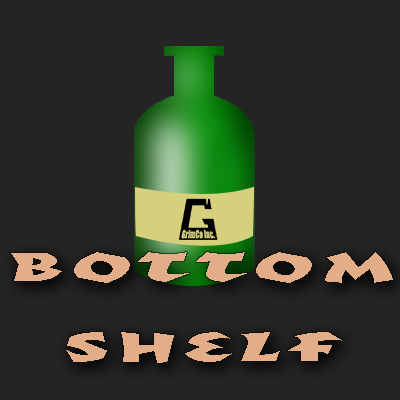
<style>
.page{position:relative;width:400px;height:400px;background:#242424}
.page>*{position:absolute;margin:0}
.t1{font:48.7px "TotallyGlyphicOT-Reg";letter-spacing:0.08em;color:#e3ad88;scale:1.99 1}
</style>
<div class="page">
<p class="t1" style="left:11px;top:252px;width:382px;height:111px;text-align:center">Bottom<br>Shelf</p>
</div>
